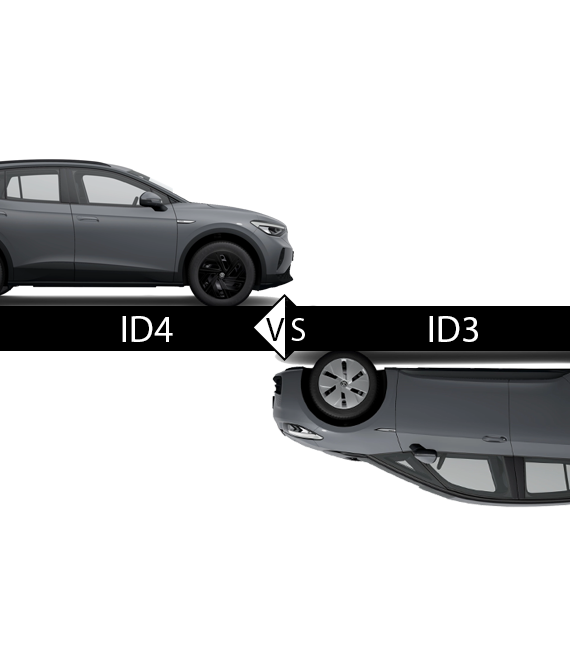
<style>
.page{position:relative;width:570px;height:660px;background:#ffffff}
.page>*{position:absolute;margin:0}
.t1{font:37.5px "MyriadPro-Regular";color:#ffffff}
.t2{font:33.3px "MyriadPro-Regular";color:#010101}
</style>
<div class="page">
<p class="t1" style="left:122px;top:316px;width:51px;height:26px">ID4</p>
<p class="t2" style="left:266px;top:318px;width:19px;height:23px">V</p>
<p class="t1" style="left:429px;top:316px;width:49px;height:26px">ID3</p>
</div>
